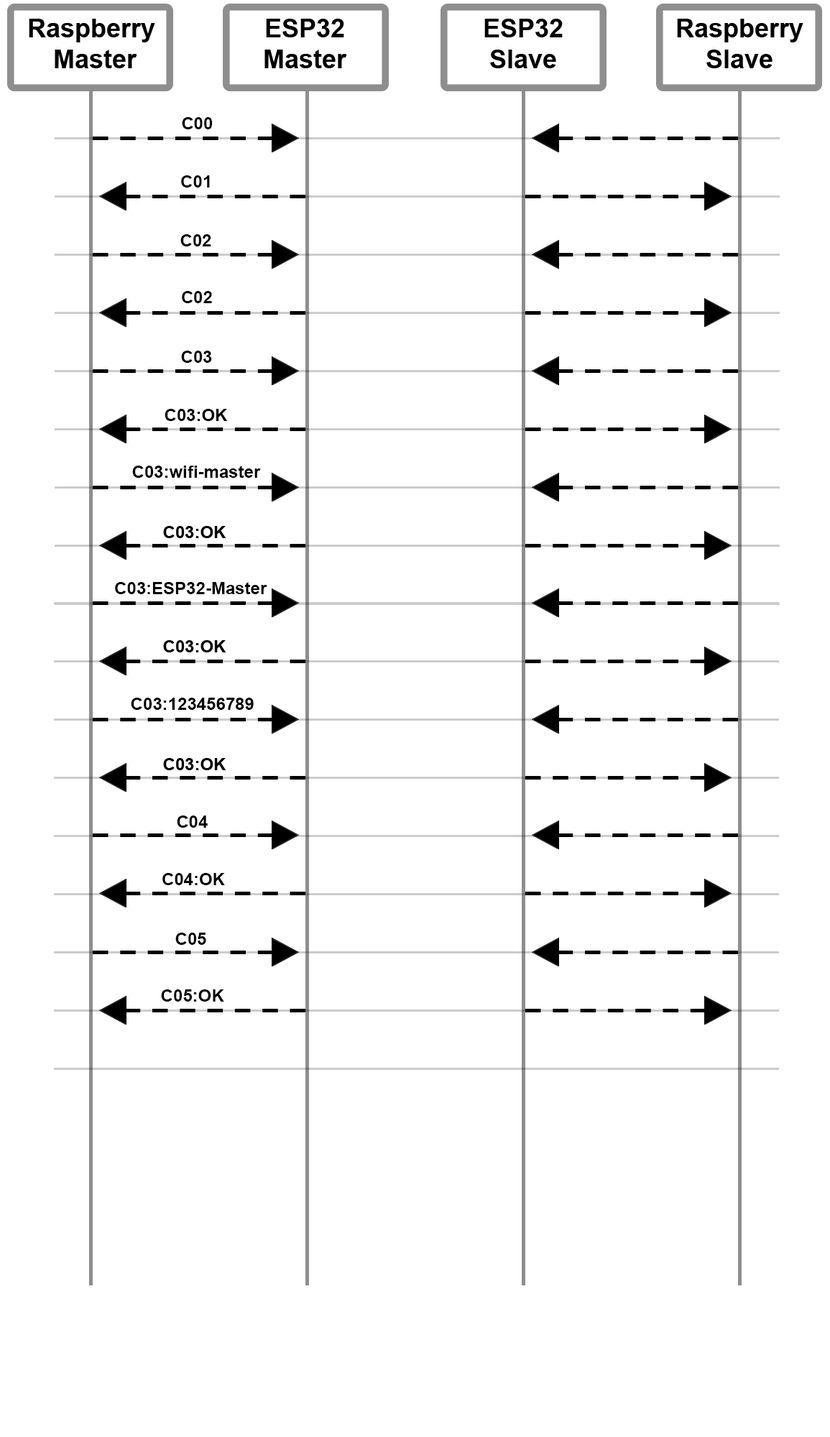
<style>
.page{position:relative;width:830px;height:1437px;background:#ffffff}
.page>*{position:absolute;margin:0}
.t1{font:17.2px "Arial-BoldMT";color:#000000}
</style>
<div class="page">
<p class="t1" style="left:182px;top:117px;width:31px;height:12px">C00</p>
<p class="t1" style="left:181px;top:175px;width:29px;height:13px">C01</p>
<p class="t1" style="left:180px;top:234px;width:31px;height:12px">C02</p>
<p class="t1" style="left:182px;top:291px;width:30px;height:12px">C02</p>
<p class="t1" style="left:181px;top:351px;width:31px;height:12px">C03</p>
<p class="t1" style="left:165px;top:409px;width:63px;height:12px">C03:OK</p>
<p class="t1" style="left:132px;top:466px;width:129px;height:12px">C03:wifi-master</p>
<p class="t1" style="left:115px;top:582px;width:152px;height:12px">C03:ESP32-Master</p>
<p class="t1" style="left:131px;top:698px;width:123px;height:12px">C03:123456789</p>
<p class="t1" style="left:177px;top:815px;width:31px;height:13px">C04</p>
<p class="t1" style="left:162px;top:873px;width:63px;height:12px">C04:OK</p>
<p class="t1" style="left:175px;top:933px;width:31px;height:12px">C05</p>
<p class="t1" style="left:161px;top:989px;width:63px;height:13px">C05:OK</p>
</div>
